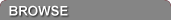
<style>
.page{position:relative;width:171px;height:20px;background:#858585}
.page>*{position:absolute;margin:0}
.t1{font:13.3px "Arial-BoldMT";color:#ffffff}
</style>
<div class="page">
<p class="t1" style="left:9px;top:5px;width:59px;height:11px">BROWSE</p>
</div>
